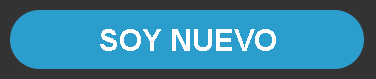
<style>
.page{position:relative;width:376px;height:79px;background:#2c9ece}
.page>*{position:absolute;margin:0}
.t1{font:30px "Arial-BoldMT";color:#ffffff}
</style>
<div class="page">
<p class="t1" style="left:100px;top:29px;width:176px;height:22px">SOY NUEVO</p>
</div>
